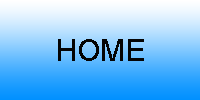
<style>
.page{position:relative;width:200px;height:100px}
.page>*{position:absolute;margin:0}
.t1{font:30px "DokChampa";color:#040404}
</style>
<div class="page">
<p class="t1" style="left:58px;top:39px;width:86px;height:22px">HOME</p>
</div>
